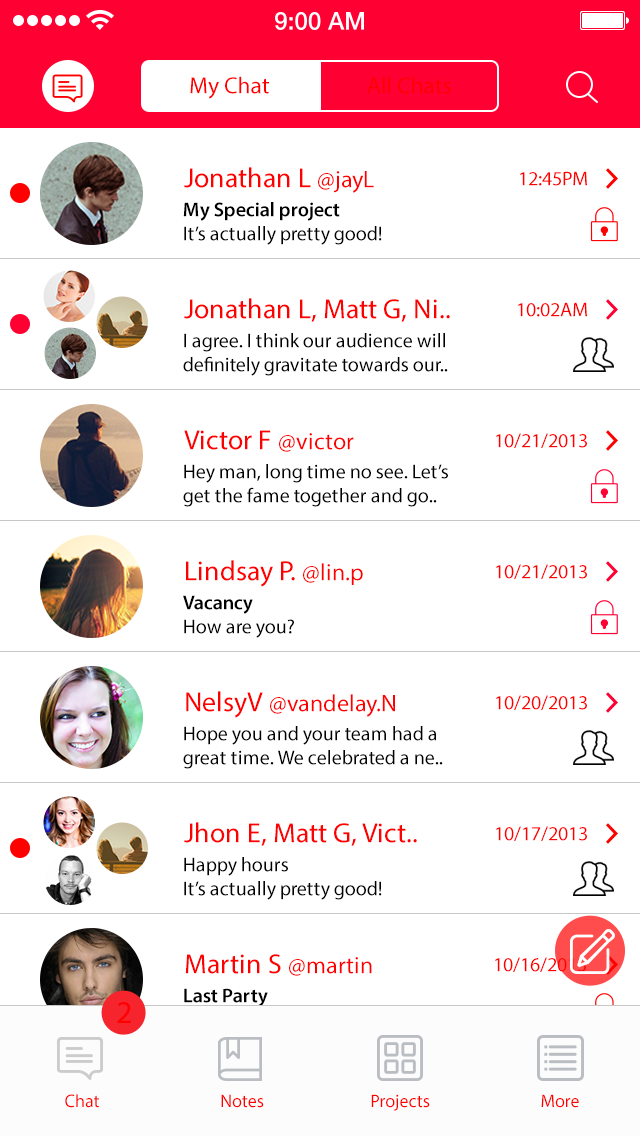
<style>
.page{position:relative;width:640px;height:1136px;background:#ffffff}
.page>*{position:absolute;margin:0}
.t1{font:23.4px "MyriadPro-Regular";color:#ff0000}
.t2{font:28px "MyriadPro-Regular";color:#ff0000}
.t3{font:24px "MyriadPro-Regular";color:#ff0000}
.t4{font:20px "MyriadPro-Regular";color:#ff0000}
.t5{font:20px "MyriadPro-Regular";color:#000000}
.t6{font:20px "MyriadPro-Semibold";color:#000000}
.t7{font:20px "MyriadPro-Regular"}
.t8{font:20px "MyriadPro-Semibold"}
.t9{font:32px "MyriadPro-Regular";letter-spacing:0.01em;color:#ff0000}
.t10{font:18px "MyriadPro-Regular";color:#ff0000}
</style>
<div class="page">
<p class="t1" style="left:190px;top:76px;width:79px;height:23px">My Chat</p>
<p class="t1" style="left:367px;top:76px;width:84px;height:18px">All Chats</p>
<p class="t2" style="left:184px;top:167px;width:190px;height:26px">Jonathan L <span class="t3">@jayL</span></p>
<p class="t4" style="left:520px;top:171px;width:67px;height:15px">12:45PM</p>
<p class="t5" style="left:183px;top:202px;width:199px;height:43px"><span class="t6">My Special project<br></span>It’s actually pretty good!</p>
<p class="t2" style="left:184px;top:298px;width:266px;height:24px">Jonathan L, Matt G, Ni..</p>
<p class="t4" style="left:518px;top:302px;width:69px;height:15px">10:02AM</p>
<p class="t5" style="left:183px;top:333px;width:265px;height:43px">I agree. I think our audience will<br>definitely gravitate towards our..</p>
<p class="t2" style="left:184px;top:430px;width:170px;height:22px">Victor F <span class="t3">@victor</span></p>
<p class="t4" style="left:496px;top:433px;width:91px;height:15px">10/21/2013</p>
<p class="t5" style="left:183px;top:464px;width:265px;height:43px">Hey man, long time no see. Let’s<br>get the fame together and go..</p>
<p class="t2" style="left:186px;top:560px;width:177px;height:27px">Lindsay P. <span class="t3">@lin.p</span></p>
<p class="t4" style="left:496px;top:564px;width:91px;height:15px">10/21/2013</p>
<p class="t5" style="left:183px;top:595px;width:111px;height:43px"><span class="t6">Vacancy<br></span>How are you?</p>
<p class="t3" style="left:186px;top:691px;width:209px;height:27px"><span class="t2">NelsyV </span>@vandelay.N</p>
<p class="t4" style="left:496px;top:695px;width:91px;height:15px">10/20/2013</p>
<p class="t5" style="left:183px;top:726px;width:260px;height:43px">Hope you and your team had a<br>great time. We celebrated a ne..</p>
<p class="t2" style="left:184px;top:822px;width:233px;height:24px">Jhon E, Matt G, Vict..</p>
<p class="t4" style="left:496px;top:826px;width:91px;height:15px">10/17/2013</p>
<p class="t5" style="left:184px;top:857px;width:198px;height:43px">Happy hours<br>It’s actually pretty good!</p>
<p class="t2" style="left:185px;top:954px;width:187px;height:22px">Martin S <span class="t3">@martin</span></p>
<p class="t4" style="left:495px;top:957px;width:91px;height:15px">10/16/2013</p>
<p class="t7" style="left:184px;top:988px;width:198px;height:43px"><span class="t8">Last Party<br></span>It’s actually pretty good!</p>
<p class="t9" style="left:117px;top:1002px;width:14px;height:21px">2</p>
<p class="t10" style="left:65px;top:1094px;width:34px;height:14px">Chat</p>
<p class="t10" style="left:221px;top:1094px;width:43px;height:14px">Notes</p>
<p class="t10" style="left:371px;top:1094px;width:59px;height:17px">Projects</p>
<p class="t10" style="left:541px;top:1094px;width:38px;height:14px">More</p>
</div>
